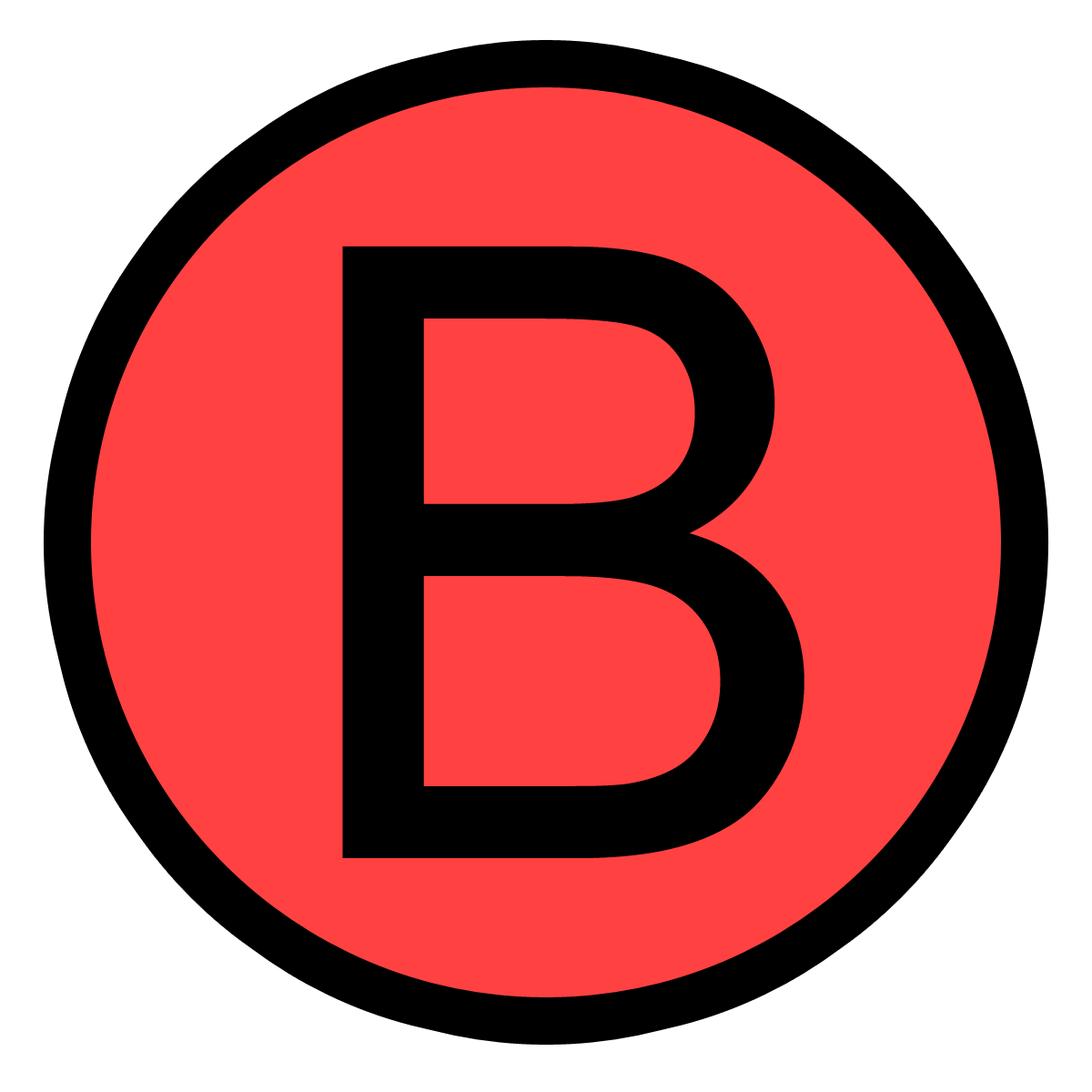
<style>
.page{position:relative;width:1092px;height:1092px;background:#ff4141}
.page>*{position:absolute;margin:0}
.t1{font:853.1px "ArialMT";color:#000000}
</style>
<div class="page">
<p class="t1" style="left:342px;top:246px;width:462px;height:612px">B</p>
</div>
